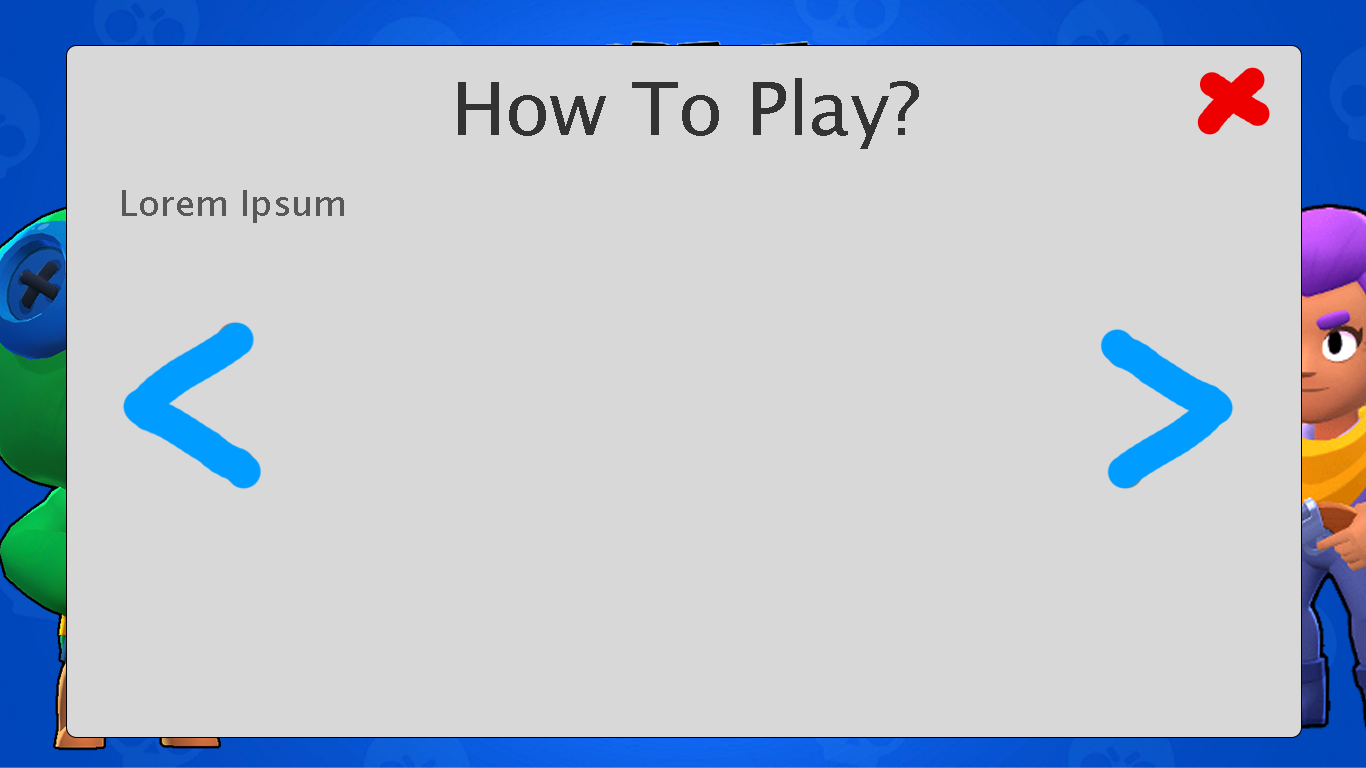
<style>
.page{position:relative;width:1366px;height:768px;background:#d8d8d8}
.page>*{position:absolute;margin:0}
.t1{font:74.3px "LucidaSansUnicode";color:#333333}
.t2{font:36px "LucidaSansUnicode";color:#585858}
</style>
<div class="page">
<p class="t1" style="left:458px;top:78px;width:461px;height:71px">How To Play?</p>
<p class="t2" style="left:122px;top:190px;width:222px;height:33px">Lorem Ipsum</p>
</div>
